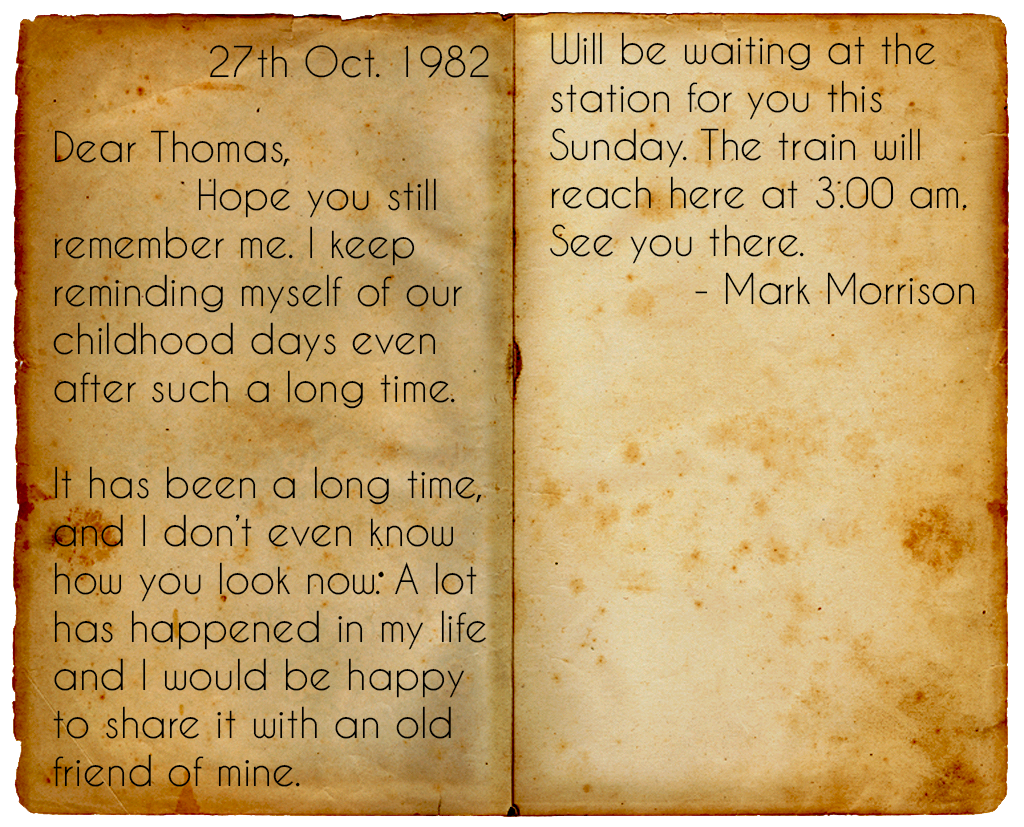
<style>
.page{position:relative;width:1024px;height:827px}
.page>*{position:absolute;margin:0}
.t1{font:40px "CaviarDreams";color:#000000}
</style>
<div class="page">
<p class="t1" style="left:550px;top:32px;width:425px;height:273px">Will be waiting at the <br>station for you this <br>Sunday. The train will<br>reach here at 3.00 am.<br>See you there.<br>    - Mark Morrison</p>
<p class="t1" style="left:210px;top:45px;width:279px;height:33px">27th Oct. 1982</p>
<p class="t1" style="left:53px;top:130px;width:434px;height:657px">Dear Thomas,<br>    Hope you still<br>remember me. I keep <br>reminding myself of our <br>childhood days even <br>after such a long time.<br><br>It has been a long time,<br>and I don’t even know <br>how you look now. A lot <br>has happened in my life<br>and I would be happy <br>to share it with an old<br>friend of mine.</p>
</div>
